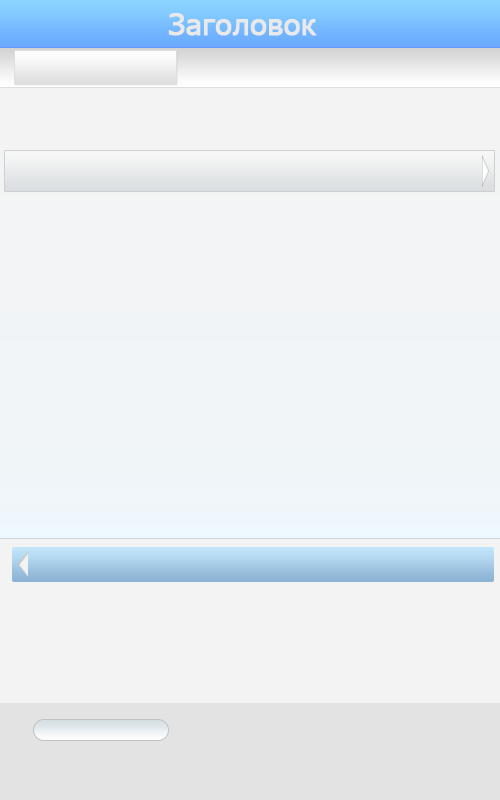
<style>
.page{position:relative;width:500px;height:800px;background:#f3f3f4}
.page>*{position:absolute;margin:0}
.t1{font:30px "Tahoma";color:#e9e9e9;font-weight:bold}
</style>
<div class="page">
<p class="t1" style="left:168px;top:13px;width:149px;height:23px">Заголовок</p>
</div>
